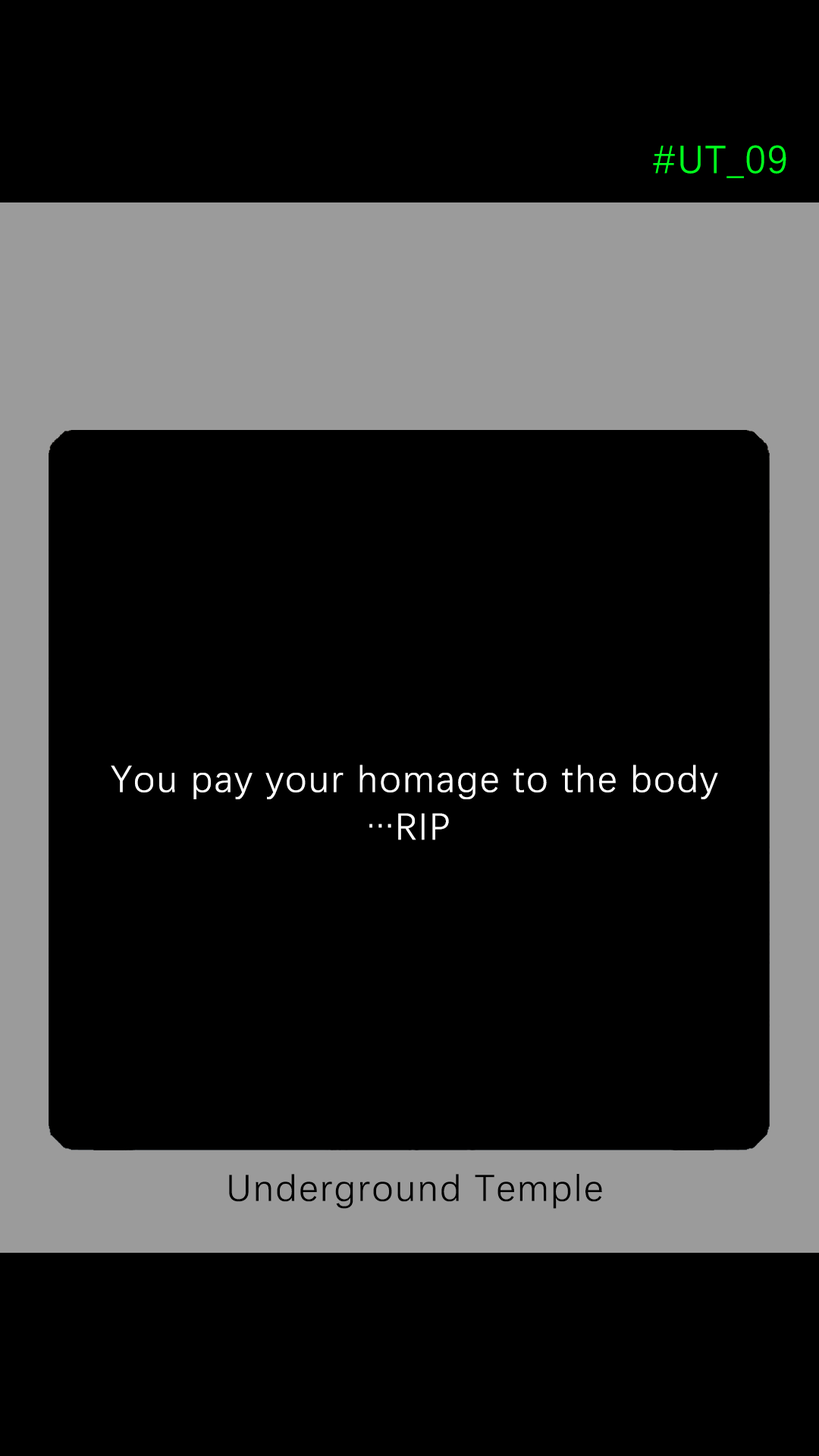
<style>
.page{position:relative;width:819px;height:1456px;background:#000000}
.page>*{position:absolute;margin:0}
.t1{font:39.2px "DengXian-Regular";letter-spacing:0.04em;color:#00ff1e}
.t2{font:37.9px/47.6px "DengXian-Regular";letter-spacing:0.04em;color:#ffffff}
.t3{font:37.9px "DengXian-Regular";letter-spacing:0.04em;color:#000000}
</style>
<div class="page">
<p class="t1" style="left:653px;top:145px;width:133px;height:33px">#UT_09</p>
<p class="t2" style="left:111px;top:764px;width:607px;height:76px;text-align:center">You pay your homage to the body<br>…RIP</p>
<p class="t3" style="left:229px;top:1174px;width:373px;height:35px">Underground Temple</p>
</div>
